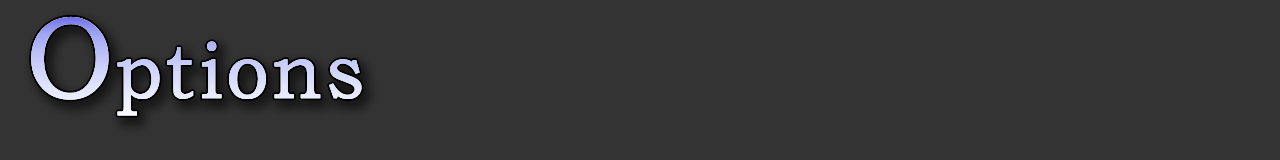
<style>
.page{position:relative;width:1280px;height:160px;background:#333333}
.page>*{position:absolute;margin:0}
.t1{font:79.5px "BookmanOldStyle";letter-spacing:0.06em;font-weight:bold;scale:0.94 1}
.t2{font:116.5px "BookmanOldStyle";font-weight:bold;scale:0.94 1}
</style>
<div class="page">
<p class="t1" style="left:31px;top:16px;width:331px;height:100px"><span class="t2">O</span>ptions</p>
</div>
